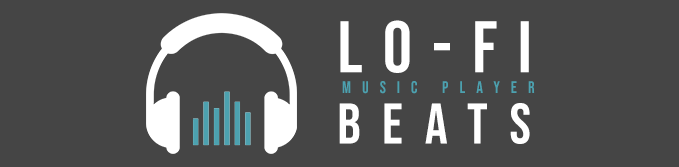
<style>
.page{position:relative;width:679px;height:167px;background:#454545}
.page>*{position:absolute;margin:0}
.t1{font:72.9px "BebasNeue-Regular";letter-spacing:0.28em;color:#ffffff}
.t2{font:16.7px "BebasNeue-Regular";letter-spacing:0.66em;color:#4ca1af}
.t3{font:57.2px "BebasNeue-Regular";letter-spacing:0.38em;color:#ffffff}
</style>
<div class="page">
<p class="t1" style="left:340px;top:20px;width:189px;height:53px">LO-FI</p>
<p class="t2" style="left:342px;top:81px;width:193px;height:13px">music player</p>
<p class="t3" style="left:339px;top:103px;width:191px;height:41px">BEATS</p>
</div>
